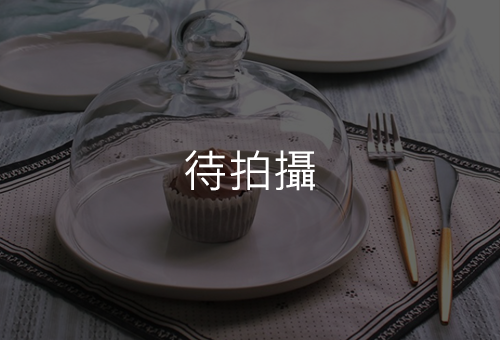
<style>
.page{position:relative;width:500px;height:340px}
.page>*{position:absolute;margin:0}
.t1{font:45px "MicrosoftJhengHeiRegular";color:#ffffff}
</style>
<div class="page">
<p class="t1" style="left:185px;top:150px;width:130px;height:41px">待拍攝</p>
</div>
